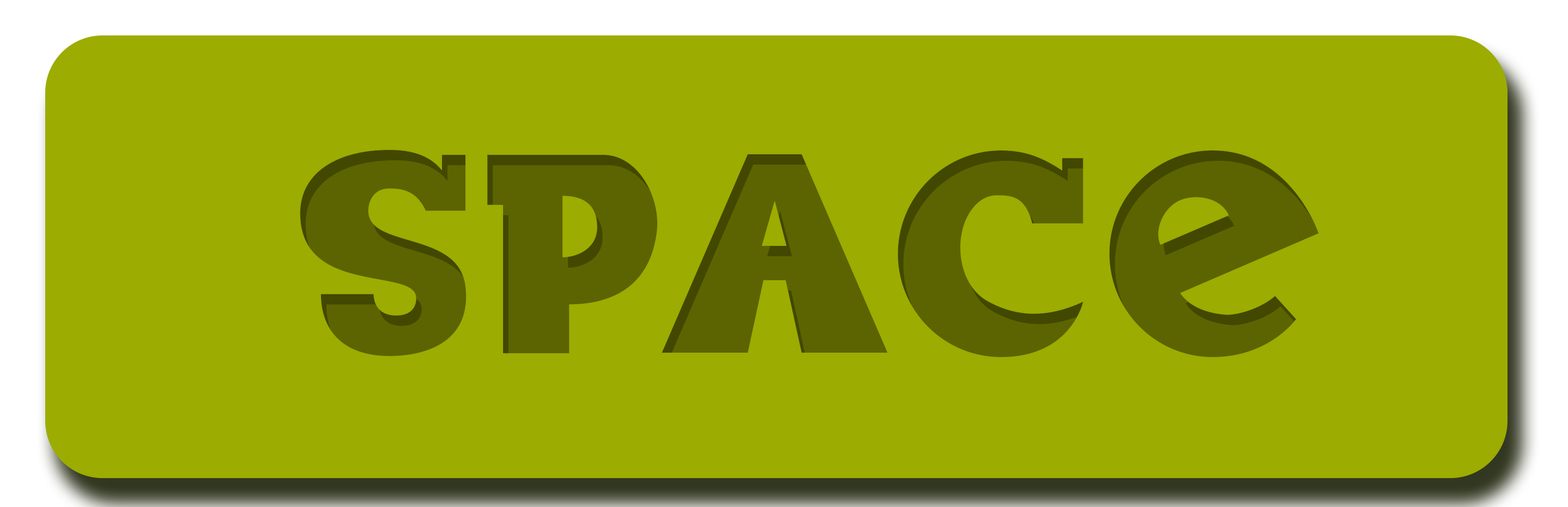
<style>
.page{position:relative;width:1568px;height:507px;background:#9cac00}
.page>*{position:absolute;margin:0}
.t1{font:275.1px "BadTyp-Regular";color:#5b6400}
</style>
<div class="page">
<p class="t1" style="left:300px;top:150px;width:1019px;height:207px">space</p>
</div>
